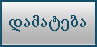
<style>
.page{position:relative;width:97px;height:47px}
.page>*{position:absolute;margin:0}
.t1{font:18px "Sylfaen";color:#134d67}
</style>
<div class="page">
<p class="t1" style="left:9px;top:15px;width:77px;height:17px">დამატება</p>
</div>
